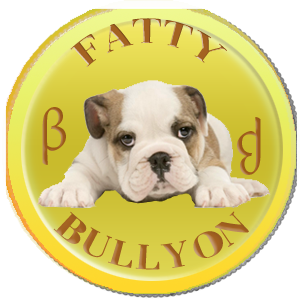
<style>
.page{position:relative;width:300px;height:300px;background:#ffffff}
.page>*{position:absolute;margin:0}
.t1{font:36px "BodoniFLF-Bold";color:#a46221}
.t2{font:60px "MinionPro-Regular";color:#9f5c1b}
</style>
<div class="page">
<p class="t1" style="left:70px;top:18px;width:157px;height:49px">FATTY</p>
<p class="t2" style="left:42px;top:107px;width:24px;height:58px">β</p>
<p class="t2" style="left:237px;top:117px;width:24px;height:58px;rotate:180deg">β</p>
<p class="t1" style="left:53px;top:211px;width:196px;height:59px">BULLYON</p>
</div>
